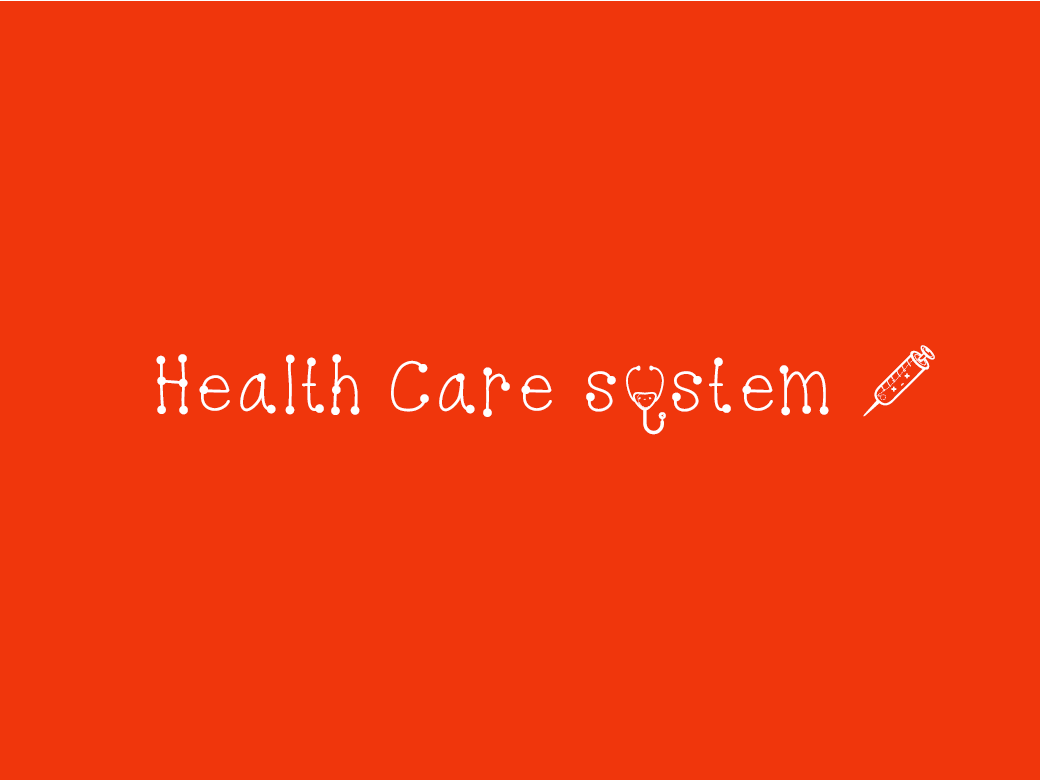
<style>
.page{position:relative;width:1040px;height:780px;background:#f0360c}
.page>*{position:absolute;margin:0}
.t1{font:150px "KawaiiMedical";color:#ffffff}
.t2{font:75px "KBDottyDot";color:#ffffff}
.t3{font:105px "KawaiiMedical";color:#ffffff}
</style>
<div class="page">
<p class="t1" style="left:863px;top:345px;width:72px;height:72px">h</p>
<p class="t2" style="left:156px;top:354px;width:673px;height:63px">Health Care s  stem</p>
<p class="t3" style="left:626px;top:365px;width:40px;height:70px">r</p>
</div>
